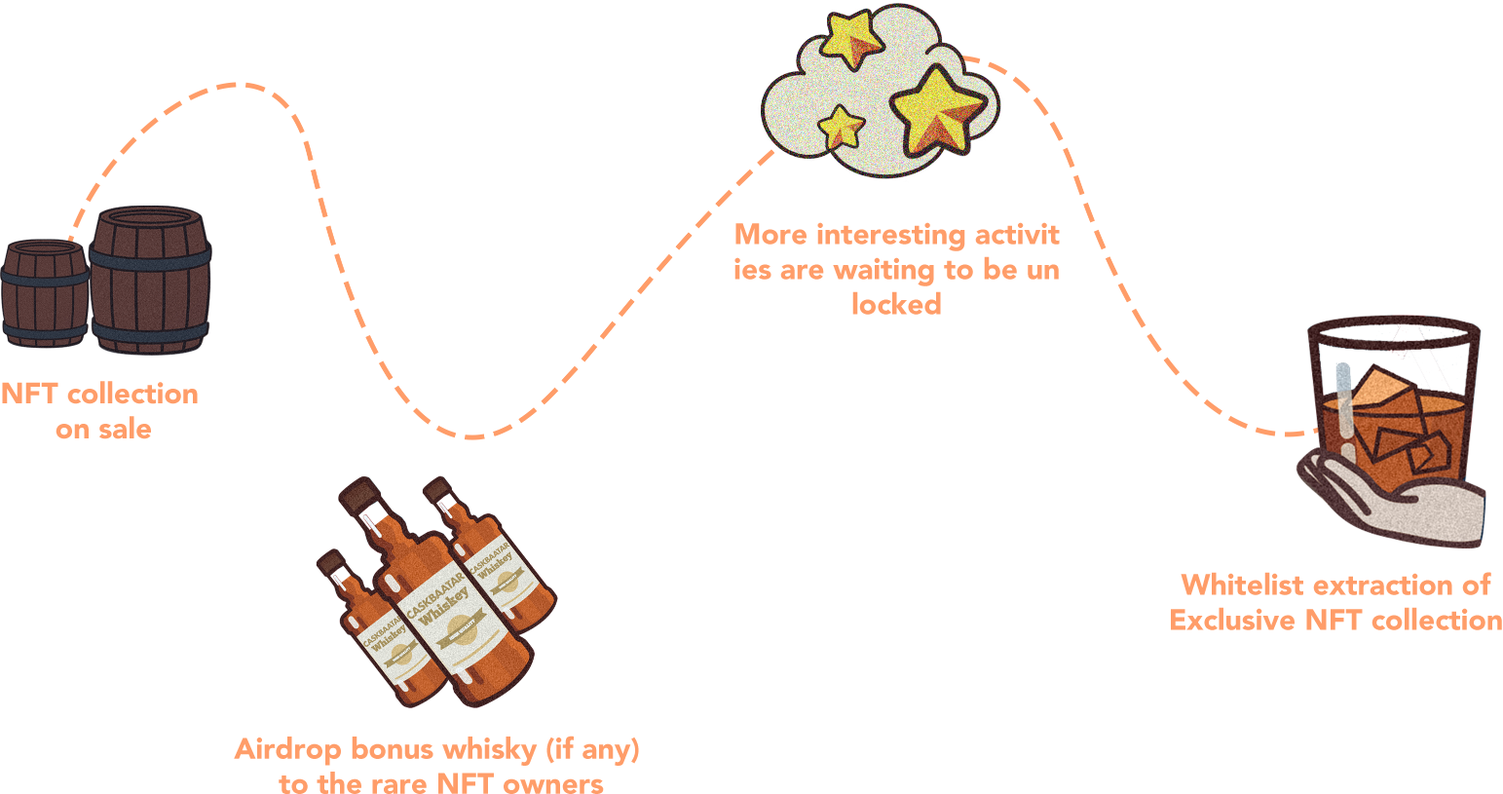
<style>
.page{position:relative;width:1503px;height:794px;background:#ffffff}
.page>*{position:absolute;margin:0}
.t1{font:29.2px "Avenir-Black";color:#ff9d69}
</style>
<div class="page">
<p class="t1" style="left:734px;top:222px;width:325px;height:93px;text-align:center">More interesting activit<br>ies are waiting to be un<br>locked</p>
<p class="t1" style="left:2px;top:381px;width:196px;height:58px;text-align:center">NFT collection<br> on sale</p>
<p class="t1" style="left:1170px;top:572px;width:332px;height:58px;text-align:center">Whitelist extraction of<br>Exclusive NFT collection</p>
<p class="t1" style="left:234px;top:735px;width:405px;height:59px;text-align:center">Airdrop bonus whisky (if any) <br>to the rare NFT owners</p>
</div>
